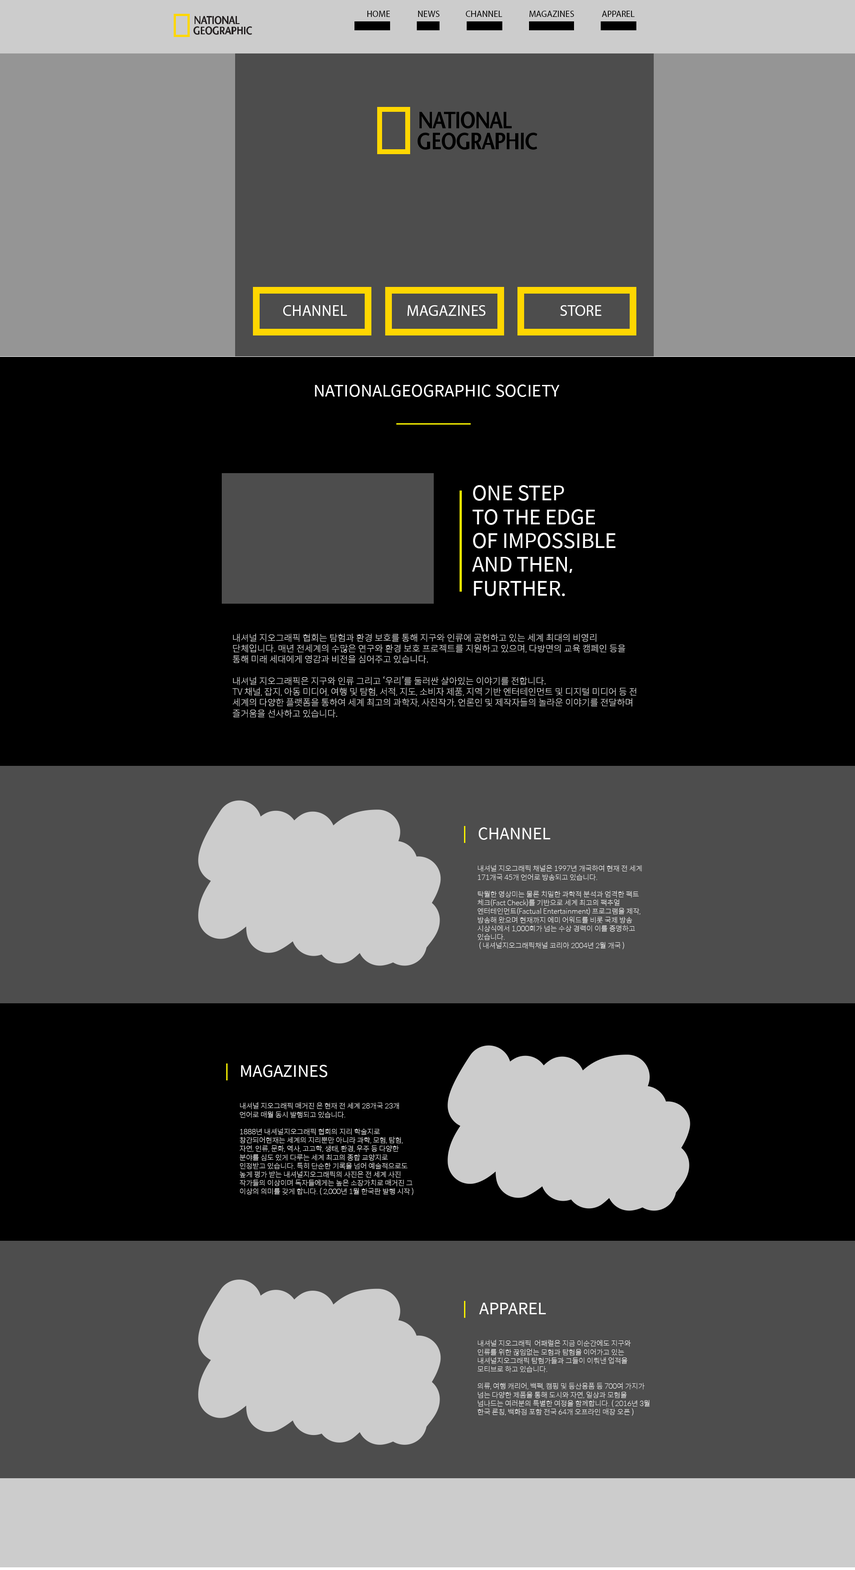
<style>
.page{position:relative;width:855px;height:1570px;background:#4d4d4d}
.page>*{position:absolute;margin:0}
.t1{font:8.9px "MyriadPro-Regular";color:#000000}
.t2{font:15.6px "MyriadPro-Regular";color:#ffffff}
.t3{font:16.2px "SpoqaHanSans-Regular";color:#ffffff}
.t4{font:19.8px "SpoqaHanSans-Regular";color:#ffffff}
.t5{font:9px "SpoqaHanSans-Thin";color:#ffffff}
.t6{font:16px "SpoqaHanSans-Regular";color:#ffffff}
.t7{font:7.1px "SpoqaHanSans-Thin";color:#ffffff}
</style>
<div class="page">
<p class="t1" style="left:367px;top:11px;width:23px;height:6px">HOME</p>
<p class="t1" style="left:418px;top:11px;width:22px;height:6px">NEWS</p>
<p class="t1" style="left:466px;top:11px;width:36px;height:6px">CHANNEL</p>
<p class="t1" style="left:530px;top:11px;width:44px;height:6px">MAGAZINES</p>
<p class="t1" style="left:602px;top:11px;width:33px;height:6px">APPAREL</p>
<p class="t2" style="left:283px;top:305px;width:64px;height:11px">CHANNEL</p>
<p class="t2" style="left:408px;top:305px;width:78px;height:11px">MAGAZINES</p>
<p class="t2" style="left:560px;top:305px;width:42px;height:11px">STORE</p>
<p class="t3" style="left:315px;top:384px;width:245px;height:13px">NATIONALGEOGRAPHIC SOCIETY</p>
<p class="t4" style="left:472px;top:485px;width:144px;height:111px">ONE STEP <br>TO THE EDGE<br>OF IMPOSSIBLE<br>AND THEN,<br>FURTHER.</p>
<p class="t5" style="left:233px;top:633px;width:404px;height:85px">내셔널 지오그래픽 협회는 탐험과 환경 보호를 통해 지구와 인류에 공헌하고 있는 세계 최대의 비영리 단체입니다. 매년 전세계의 수많은 연구와 환경 보호 프로젝트를 지원하고 있으며, 다방면의 교육 캠페인 등을 통해 미래 세대에게 영감과 비전을 심어주고 있습니다.<br> <br>내셔널 지오그래픽은 지구와 인류 그리고 ‘우리’를 둘러싼 살아있는 이야기를 전합니다.<br>TV 채널, 잡지, 아동 미디어, 여행 및 탐험, 서적, 지도, 소비자 제품, 지역 기반 엔터테인먼트 및 디지털 미디어 등 전 세계의 다양한 플랫폼을 통하여 세계 최고의 과학자, 사진작가, 언론인 및 제작자들의 놀라운 이야기를 전달하며  즐거움을 선사하고 있습니다.</p>
<p class="t6" style="left:479px;top:827px;width:72px;height:13px">CHANNEL</p>
<p class="t7" style="left:477px;top:865px;width:165px;height:84px">내셔널 지오그래픽 채널은 1997년 개국하여 현재 전 세계 171개국 45개 언어로 방송되고 있습니다. <br><br>탁월한 영상미는 물론 치밀한 과학적 분석과 엄격한 팩트 체크(Fact Check)를 기반으로 세계 최고의 팩추얼 엔터테인먼트(Factual Entertainment) 프로그램을 제작, 방송해 왔으며 현재까지 에미 어워드를 비롯 국제 방송 시상식에서 1,000회가 넘는 수상 경력이 이를 증명하고 있습니다.<br> ( 내셔널지오그래픽채널 코리아 2004년 2월 개국 )</p>
<p class="t6" style="left:241px;top:1065px;width:86px;height:12px">MAGAZINES</p>
<p class="t7" style="left:240px;top:1102px;width:173px;height:93px">내셔널 지오그래픽 매거진 은 현재 전 세계 28개국 23개 언어로 매월 동시 발행되고 있습니다.<br>          1888년 내셔널지오그래픽 협회의 지리 학술지로 창간되어현재는 세계의 지리뿐만 아니라 과학, 모험, 탐험, 자연, 인류, 문화, 역사, 고고학, 생태, 환경, 우주 등 다양한 분야를 심도 있게 다루는 세계 최고의 종합 교양지로 인정받고 있습니다. 특히 단순한 기록을 넘어 예술적으로도 높게 평가 받는 내셔널지오그래픽의 사진은 전 세계 사진 작가들의 이상이며 독자들에게는 높은 소장가치로 매거진 그 이상의 의미를 갖게 합니다. ( 2,000년 1월 한국판 발행 시작 )</p>
<p class="t6" style="left:479px;top:1302px;width:67px;height:12px">APPAREL</p>
<p class="t7" style="left:477px;top:1339px;width:173px;height:77px">내셔널 지오그래픽  어패럴은 지금 이순간에도 지구와 인류를 위한 끊임없는 모험과 탐험을 이어가고 있는 내셔널지오그래픽 탐험가들과 그들이 이뤄낸 업적을 모티브로 하고 있습니다. <br><br>의류, 여행 캐리어, 백팩, 캠핑 및 등산용품 등 700여 가지가 넘는 다양한 제품을 통해 도시와 자연, 일상과 모험을 넘나드는 여러분의 특별한 여정을 함께합니다. ( 2016년 3월 한국 론칭, 백화점 포함 전국 64개 오프라인 매장 오픈 )</p>
</div>
